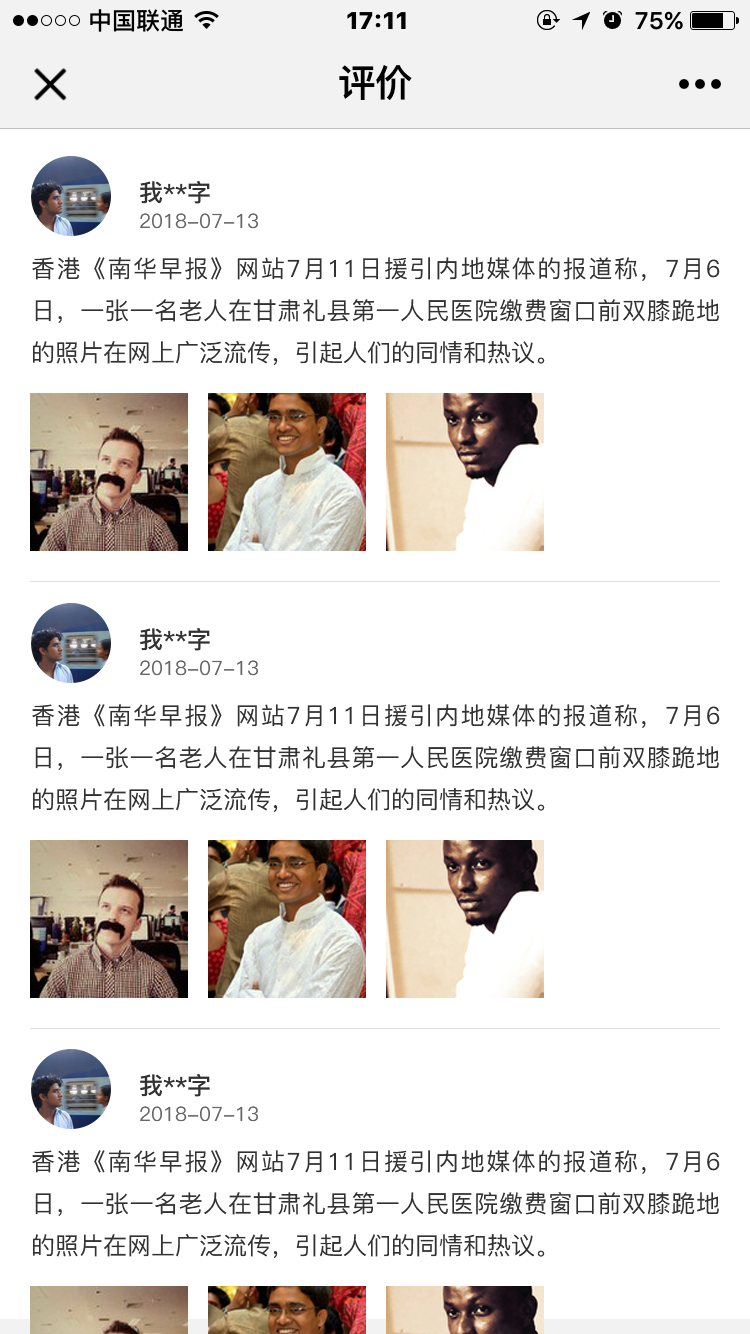
<style>
.page{position:relative;width:750px;height:1334px;background:#ffffff}
.page>*{position:absolute;margin:0}
.t1{font:37.6px "PingFang-SC-Heavy";color:#000000}
.t2{font:24px "PingFang-SC-Bold";color:#323232}
.t3{font:20px "PingFang-SC-Medium";color:#666666}
.t4{font:24px "PingFang-SC-Medium";color:#323232}
</style>
<div class="page">
<p class="t1" style="left:339px;top:65px;width:73px;height:35px">评价</p>
<p class="t2" style="left:140px;top:181px;width:70px;height:23px">我**字</p>
<p class="t3" style="left:140px;top:213px;width:118px;height:16px">2018-07-13</p>
<p class="t4" style="left:32px;top:257px;width:688px;height:108px;text-align:justify">香港《南华早报》网站7月11日援引内地媒体的报道称，7月6日，一张一名老人在甘肃礼县第一人民医院缴费窗口前双膝跪地的照片在网上广泛流传，引起人们的同情和热议。</p>
<p class="t2" style="left:140px;top:628px;width:70px;height:23px">我**字</p>
<p class="t3" style="left:140px;top:660px;width:118px;height:16px">2018-07-13</p>
<p class="t4" style="left:32px;top:704px;width:688px;height:108px;text-align:justify">香港《南华早报》网站7月11日援引内地媒体的报道称，7月6日，一张一名老人在甘肃礼县第一人民医院缴费窗口前双膝跪地的照片在网上广泛流传，引起人们的同情和热议。</p>
<p class="t2" style="left:140px;top:1074px;width:70px;height:23px">我**字</p>
<p class="t3" style="left:140px;top:1106px;width:118px;height:16px">2018-07-13</p>
<p class="t4" style="left:32px;top:1150px;width:688px;height:108px;text-align:justify">香港《南华早报》网站7月11日援引内地媒体的报道称，7月6日，一张一名老人在甘肃礼县第一人民医院缴费窗口前双膝跪地的照片在网上广泛流传，引起人们的同情和热议。</p>
</div>
